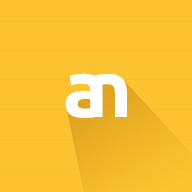
<style>
.page{position:relative;width:192px;height:192px;background:#fac32f}
.page>*{position:absolute;margin:0}
.t1{font:80px "Ubuntu-Bold";letter-spacing:-0.28em;color:#ffffff}
</style>
<div class="page">
<p class="t1" style="left:65px;top:73px;width:62px;height:45px">an</p>
</div>
